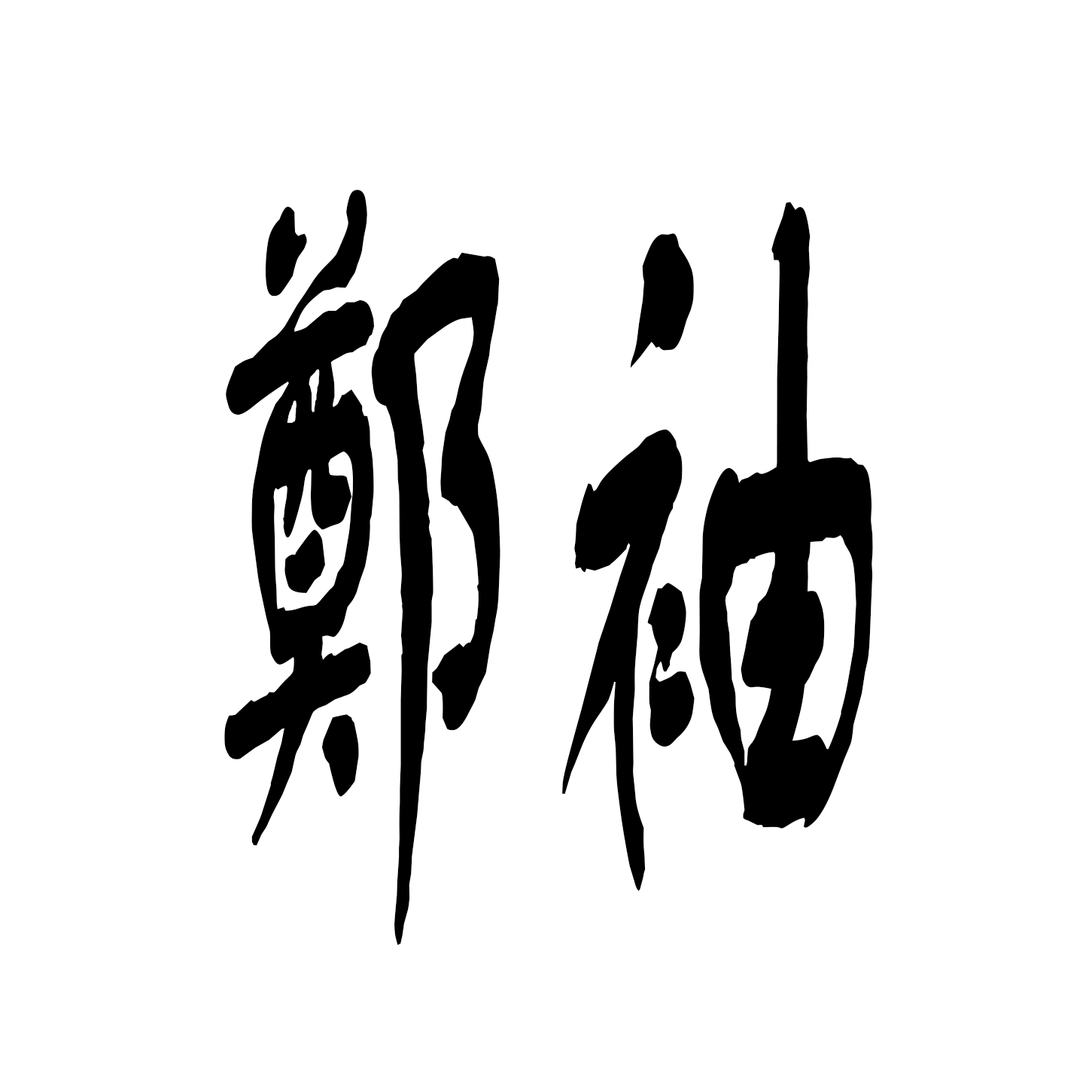
<style>
.page{position:relative;width:1092px;height:1092px;background:#ffffff}
.page>*{position:absolute;margin:0}
.t1{font:804.8px "HYn1gf";color:#000000;scale:0.45 1}
</style>
<div class="page">
<p class="t1" style="left:224px;top:190px;width:649px;height:755px">郑袖</p>
</div>
